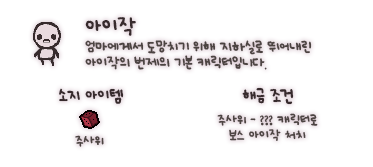
<style>
.page{position:relative;width:373px;height:167px;background:#ffffff}
.page>*{position:absolute;margin:0}
.t1{font:11px/16px "UhBeeSe_hyunBold";letter-spacing:-0.025em;color:#4c4442}
.t2{font:16px/23px "UhBeeSe_hyunBold";color:#372b2d}
.t3{font:12px "UhBeeSe_hyunBold";color:#372b2d}
.t4{font:12px "UhBeeSe_hyunBold";letter-spacing:-0.1em;color:#372b2d}
.t5{font:12px "UhBeeSe_hyunBold";letter-spacing:-0.15em;color:#372b2d}
.t6{font:10px/14.5px "UhBeeSe_hyunBold";color:#4c4442}
.t7{font:10px "UhBeeSe_hyunBold";color:#4c4442}
</style>
<div class="page">
<p class="t1" style="left:85px;top:17px;width:227px;height:53px"><span class="t2">아이작<br></span>엄마에게서 도망치기 위해 지하실로 뛰어내린<br>아이작의 번제의 기본 캐릭터입니다.</p>
<p class="t3" style="left:59px;top:88px;width:65px;height:16px"><span class="t4">소</span>지 아이템</p>
<p class="t3" style="left:242px;top:87px;width:52px;height:18px">해금 <span class="t5">조</span>건</p>
<p class="t6" style="left:217px;top:113px;width:101px;height:28px;text-align:center">주사위 - ??? 캐릭터로<br>보스 아이작 처치</p>
<p class="t7" style="left:75px;top:135px;width:29px;height:12px">주사위</p>
</div>
